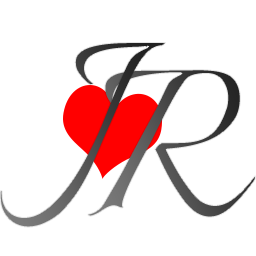
<style>
.page{position:relative;width:256px;height:256px;background:#ffffff}
.page>*{position:absolute;margin:0}
.t1{font:260px "Italianno-Regular";letter-spacing:-0.01em;color:#ffffff}
</style>
<div class="page">
<p class="t1" style="left:0px;top:42px;width:166px;height:186px">J</p>
<p class="t1" style="left:87px;top:69px;width:169px;height:149px">R</p>
</div>
